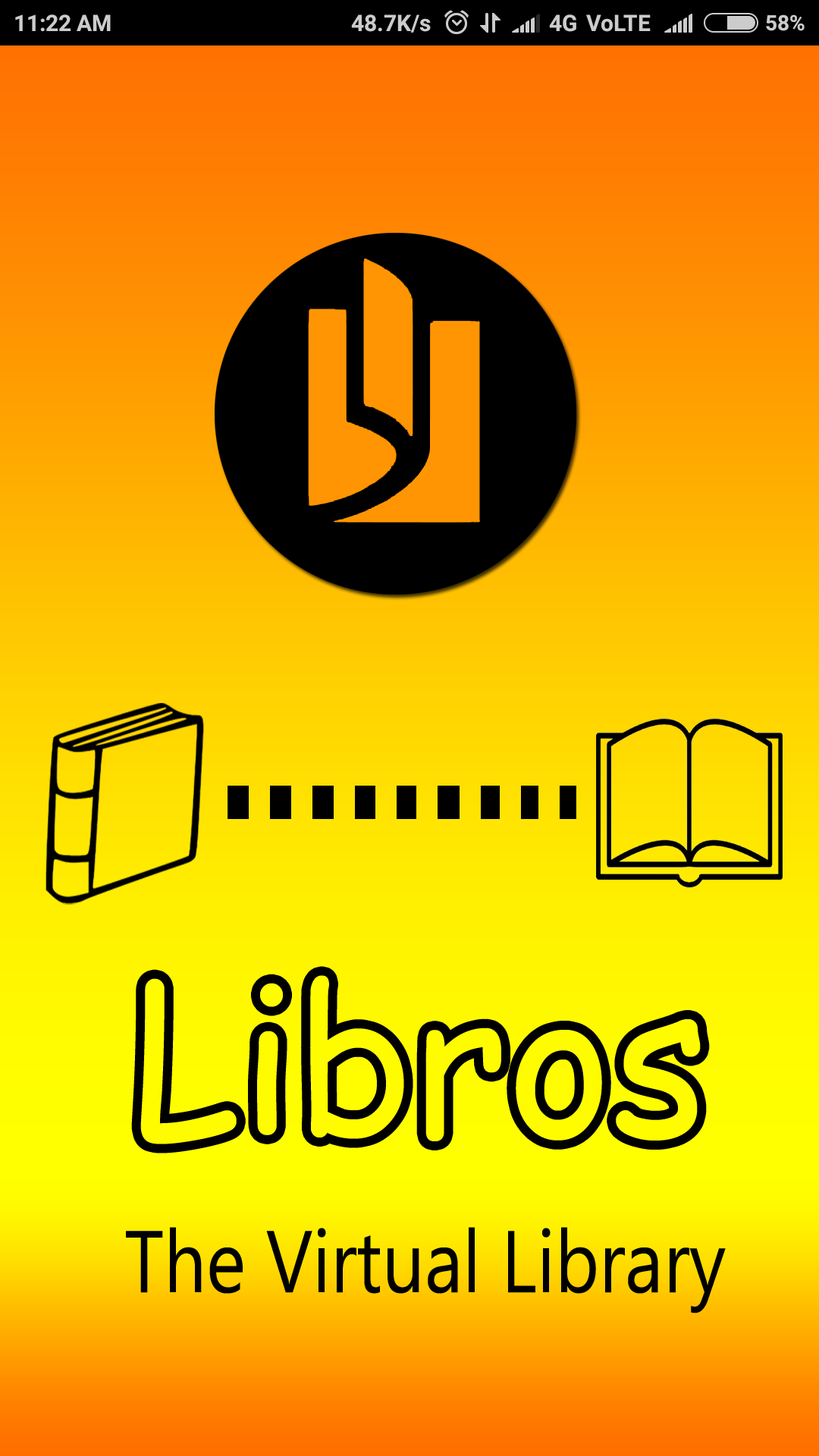
<style>
.page{position:relative;width:819px;height:1456px}
.page>*{position:absolute;margin:0}
.t1{font:206.6px "ComicSansMS";color:#fffc00;scale:0.96 1}
.t2{font:87.6px "Ebrima";color:#000000;scale:0.86 1}
</style>
<div class="page">
<p class="t1" style="left:140px;top:975px;width:561px;height:169px">Libros</p>
<p class="t2" style="left:126px;top:1227px;width:600px;height:86px">The Virtual Library</p>
</div>
